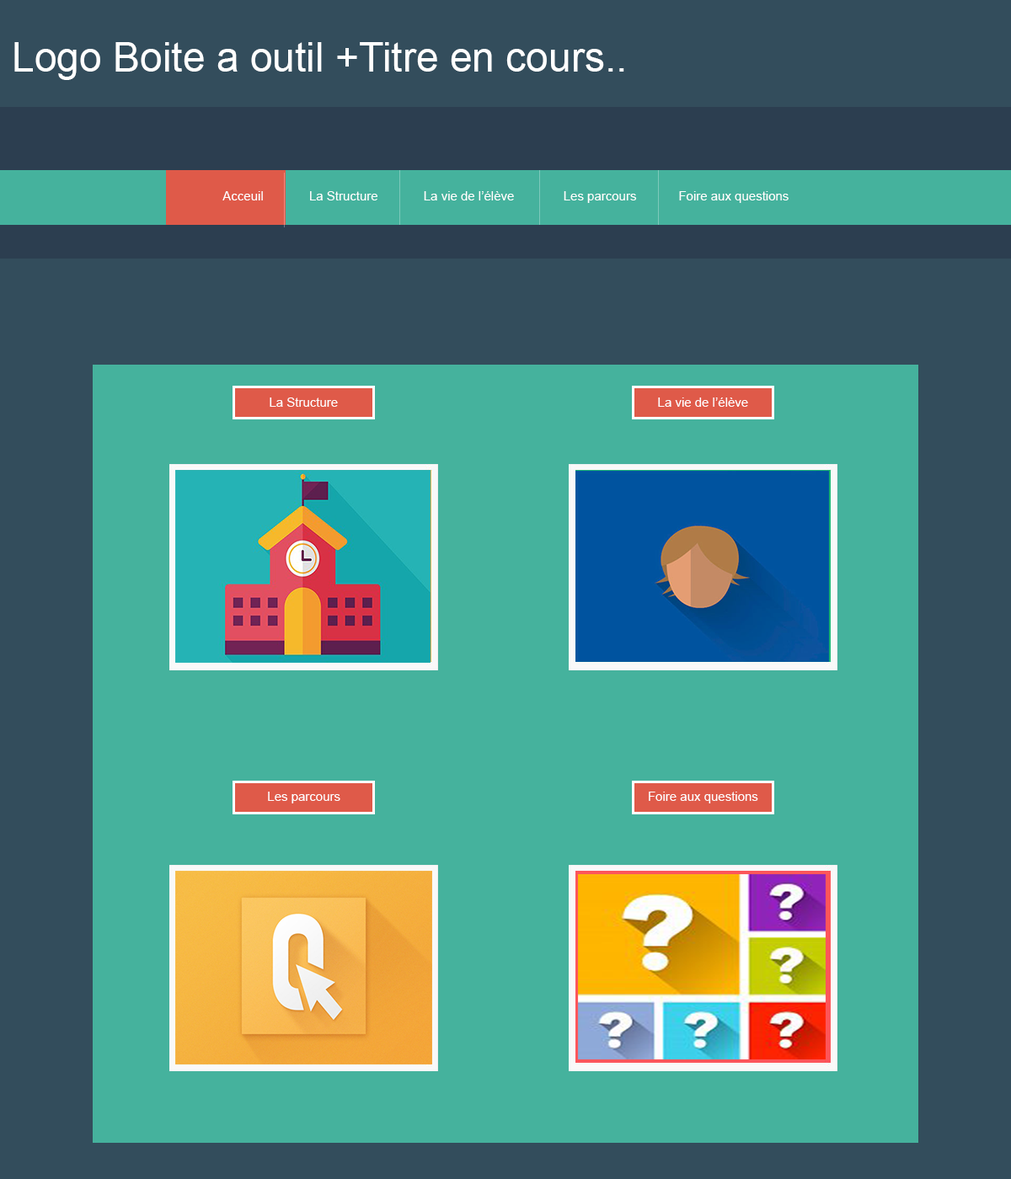
<style>
.page{position:relative;width:1011px;height:1179px;background:#45b29d}
.page>*{position:absolute;margin:0}
.t1{font:40.4px "ArialMT";color:#ffffff}
.t2{font:12.6px "ArialMT";color:#ffffff}
</style>
<div class="page">
<p class="t1" style="left:14px;top:42px;width:610px;height:38px">Logo Boite a outil +Titre en cours..</p>
<p class="t2" style="left:222px;top:191px;width:567px;height:12px">Acceuil             La Structure             La vie de l’élève              Les parcours            Foire aux questions</p>
<p class="t2" style="left:270px;top:398px;width:68px;height:9px">La Structure</p>
<p class="t2" style="left:658px;top:398px;width:90px;height:9px">La vie de l’élève</p>
<p class="t2" style="left:268px;top:792px;width:72px;height:12px">Les parcours</p>
<p class="t2" style="left:649px;top:792px;width:109px;height:12px">Foire aux questions</p>
</div>
